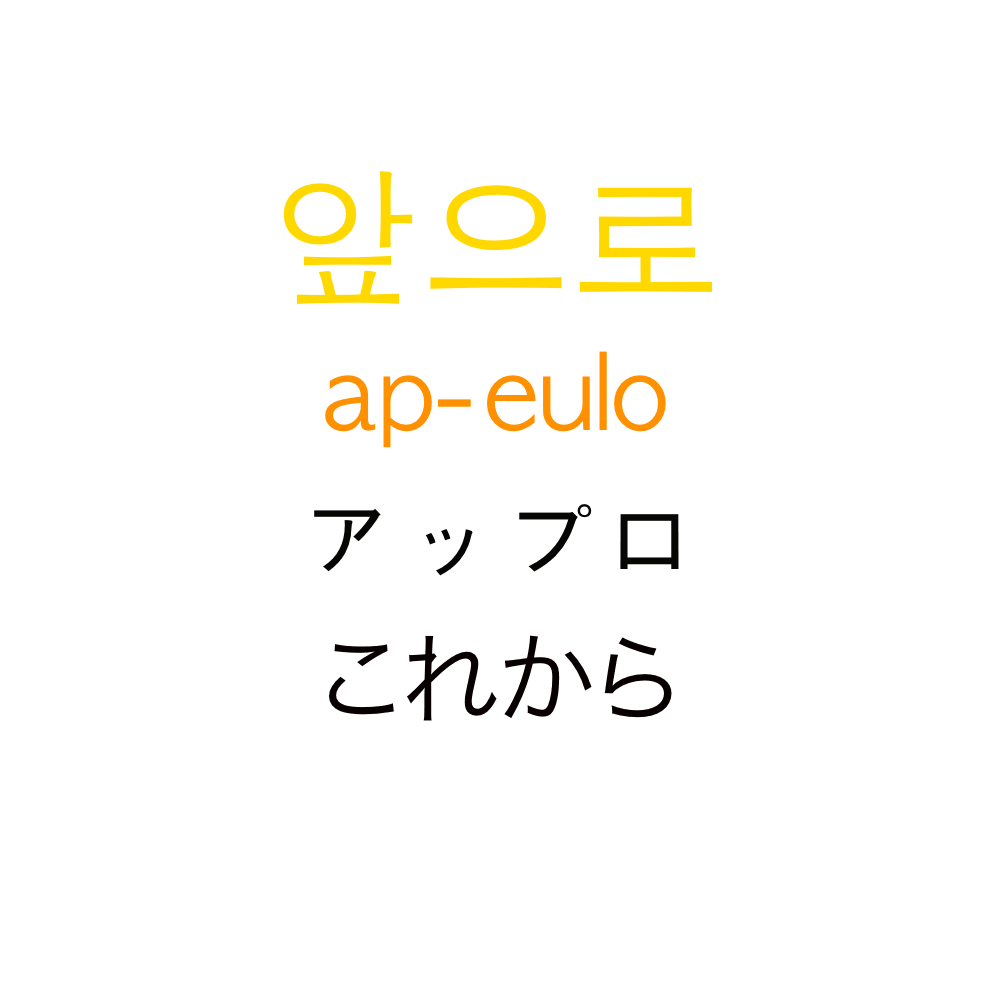
<style>
.page{position:relative;width:1000px;height:1000px;background:#ffffff}
.page>*{position:absolute;margin:0}
.t1{font:150px "AppleGothic";color:#ffd800}
.t2{font:100px "AppleGothic";color:#ff9000}
.t3{font:100px "AppleGothic";color:#060605}
.t4{font:100px "HiraKakuProN-W3";color:#080000}
</style>
<div class="page">
<p class="t1" style="left:283px;top:171px;width:430px;height:133px">앞으로</p>
<p class="t2" style="left:325px;top:351px;width:341px;height:97px">ap-eulo</p>
<p class="t3" style="left:314px;top:504px;width:365px;height:72px">アップロ</p>
<p class="t4" style="left:329px;top:635px;width:343px;height:86px">これから</p>
</div>
